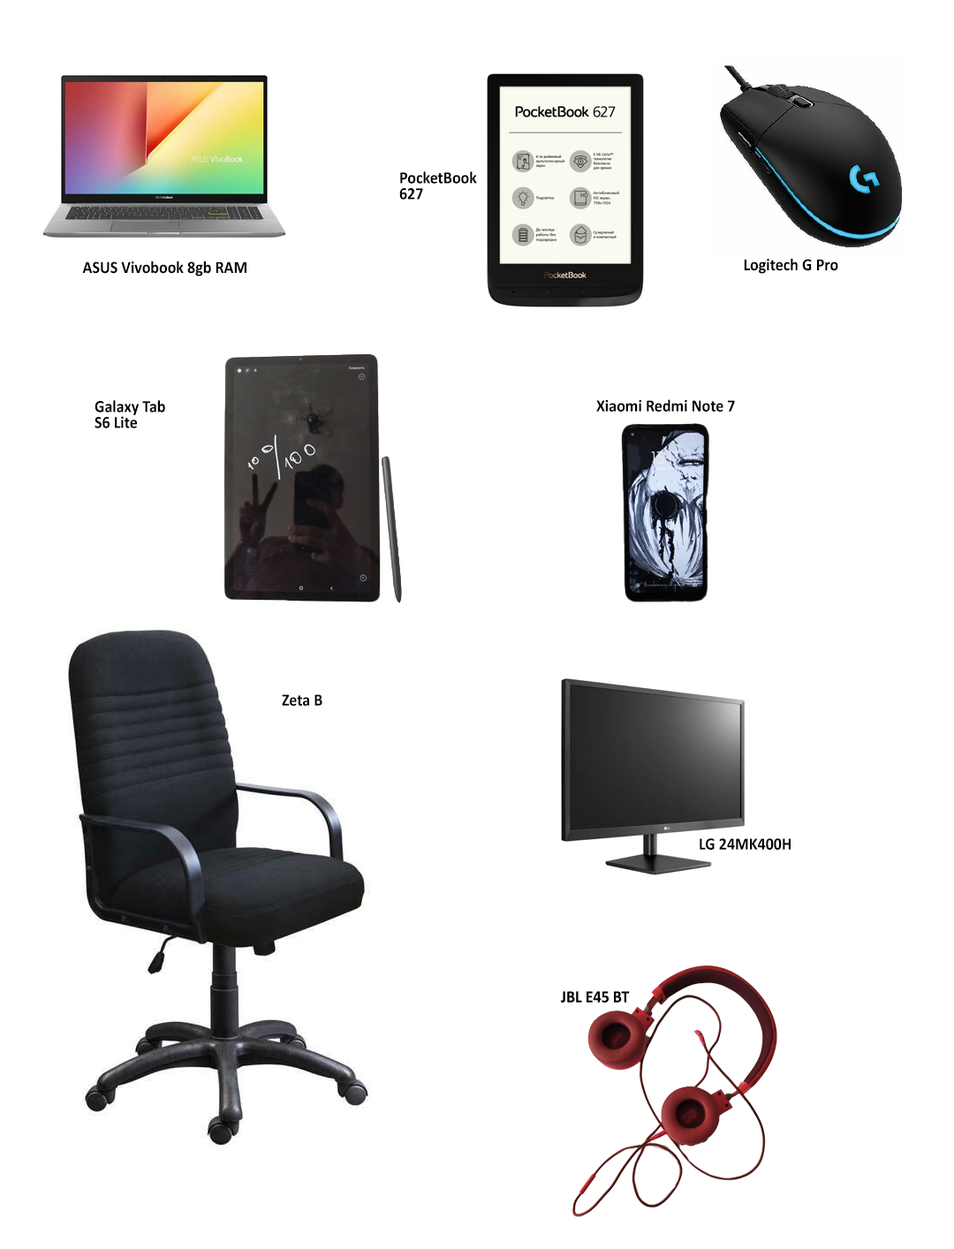
<style>
.page{position:relative;width:954px;height:1249px;background:#ffffff}
.page>*{position:absolute;margin:0}
.t1{font:17.3px/15.9px "Calibri-Bold";color:#000000;scale:0.92 1}
.t2{font:17.3px "Calibri-Bold";color:#000000;scale:0.92 1}
</style>
<div class="page">
<p class="t1" style="left:399px;top:171px;width:78px;height:29px">PocketBook<br>627</p>
<p class="t2" style="left:82px;top:261px;width:165px;height:16px">ASUS Vivobook 8gb RAM</p>
<p class="t2" style="left:744px;top:258px;width:95px;height:16px">Logitech G Pro</p>
<p class="t1" style="left:95px;top:400px;width:70px;height:29px">Galaxy Tab<br>S6 Lite</p>
<p class="t2" style="left:596px;top:399px;width:139px;height:13px">Xiaomi Redmi Note 7</p>
<p class="t2" style="left:282px;top:695px;width:41px;height:11px">Zeta B</p>
<p class="t2" style="left:700px;top:839px;width:91px;height:11px">LG 24MK400H</p>
</div>
